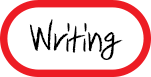
<style>
.page{position:relative;width:151px;height:77px;background:#ffffff}
.page>*{position:absolute;margin:0}
.t1{font:44.5px "SDGongPil-aMd";letter-spacing:-0.06em;color:#000000}
</style>
<div class="page">
<p class="t1" style="left:29px;top:19px;width:94px;height:41px">Writing</p>
</div>
